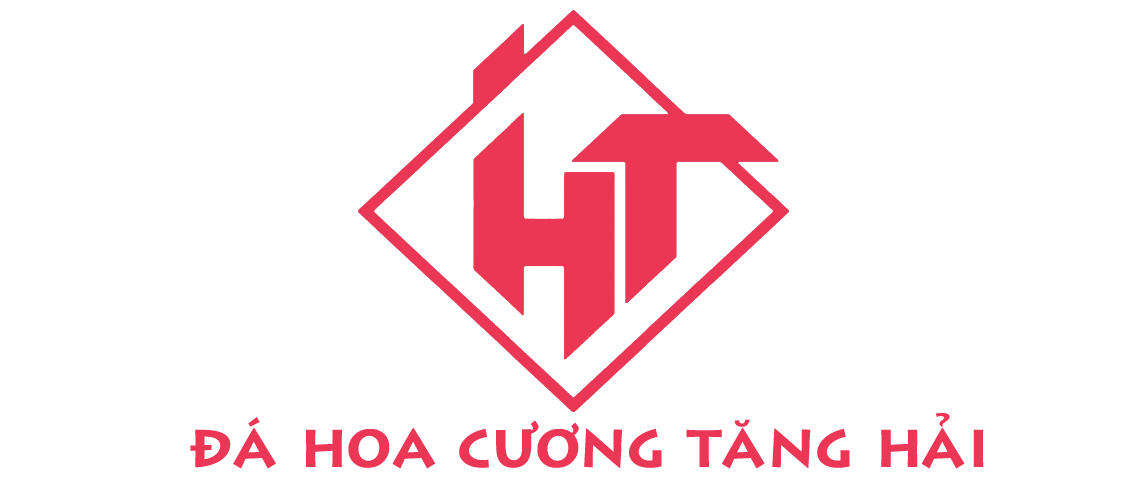
<style>
.page{position:relative;width:1136px;height:500px;background:#ffffff}
.page>*{position:absolute;margin:0}
.t1{font:52.3px "VNI-Lithos";color:#eb3656}
</style>
<div class="page">
<p class="t1" style="left:190px;top:412px;width:794px;height:57px">ÑAÙ HOA CÖÔNG TAÊNG HAÛI</p>
</div>
